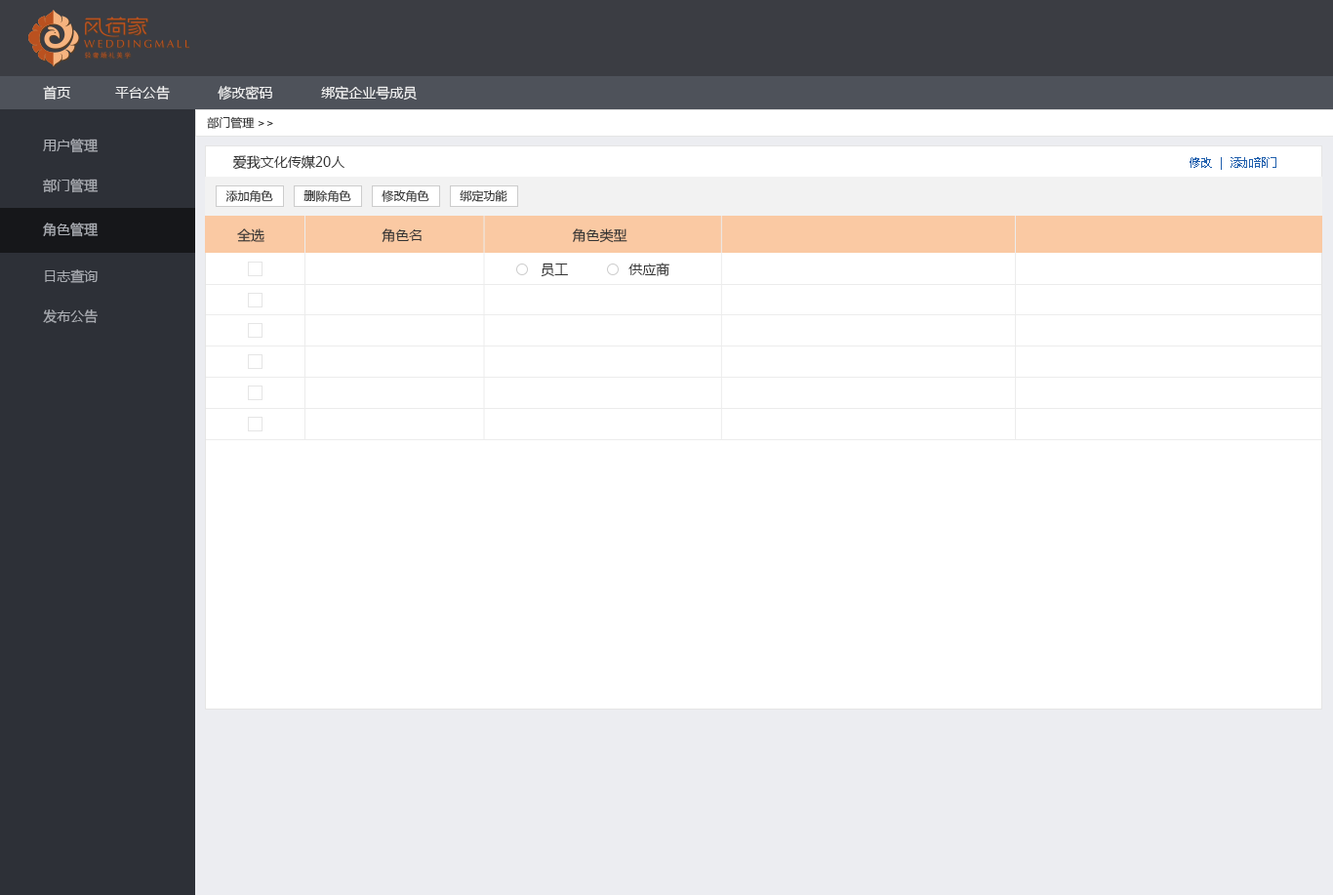
<style>
.page{position:relative;width:1333px;height:895px;background:#ffffff}
.page>*{position:absolute;margin:0}
.t1{font:13.7px "MicrosoftYaHei";color:#f2f2f2}
.t2{font:11.7px "MicrosoftYaHei";color:#333333}
.t3{font:13.7px/40px "MicrosoftYaHei";color:#aaadb3}
.t4{font:13.7px "MicrosoftYaHei";color:#333333}
.t5{font:11.7px "MicrosoftYaHei";color:#2160ad}
.t6{font:13.7px "MicrosoftYaHei";color:#aaadb3}
</style>
<div class="page">
<p class="t1" style="left:43px;top:86px;width:374px;height:14px">首页           平台公告            修改密码            绑定企业号成员</p>
<p class="t2" style="left:207px;top:116px;width:66px;height:13px">部门管理&gt;&gt;</p>
<p class="t3" style="left:43px;top:139px;width:56px;height:54px">用户管理<br>部门管理</p>
<p class="t4" style="left:232px;top:155px;width:113px;height:15px">爱我文化传媒20人</p>
<p class="t5" style="left:1189px;top:157px;width:87px;height:13px">修改  |  添加部门</p>
<p class="t2" style="left:225px;top:189px;width:282px;height:13px">添加角色         删除角色         修改角色         绑定功能</p>
<p class="t6" style="left:43px;top:222px;width:56px;height:15px">角色管理</p>
<p class="t4" style="left:237px;top:228px;width:390px;height:15px">全选                             角色名                                     角色类型</p>
<p class="t3" style="left:43px;top:269px;width:55px;height:54px">日志查询<br>发布公告</p>
<p class="t4" style="left:541px;top:262px;width:128px;height:15px">员工               供应商</p>
</div>
